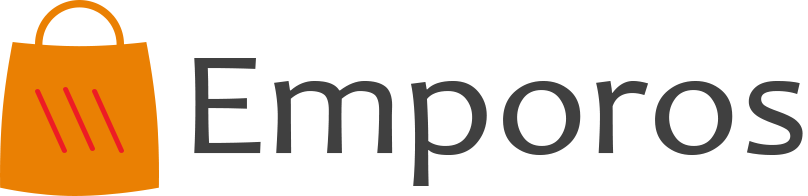
<style>
.page{position:relative;width:808px;height:196px;background:#ffffff}
.page>*{position:absolute;margin:0}
.t1{font:150px "Candara";color:#404040;scale:1.11 1}
</style>
<div class="page">
<p class="t1" style="left:194px;top:58px;width:609px;height:128px">Emporos</p>
</div>
